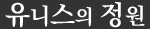
<style>
.page{position:relative;width:150px;height:29px;background:#333333}
.page>*{position:absolute;margin:0}
.t1{font:26.9px "KoPubBatangBold";letter-spacing:-0.02em;color:#ffffff}
.t2{font:22.4px "KoPubBatangBold";letter-spacing:-0.02em;color:#ffffff}
.t3{font:20.1px "KoPubBatangBold";letter-spacing:-0.02em;color:#ffffff}
</style>
<div class="page">
<p class="t1" style="left:5px;top:1px;width:140px;height:27px">유<span class="t2">니</span>스<span class="t3">의 </span>정<span class="t2">원</span></p>
</div>
